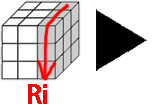
<style>
.page{position:relative;width:162px;height:108px;background:#ffffff}
.page>*{position:absolute;margin:0}
.t1{font:27px "MyriadPro-Regular";color:#ff0000;font-weight:bold}
</style>
<div class="page">
<p class="t1" style="left:28px;top:84px;width:19px;height:20px">Ri</p>
</div>
